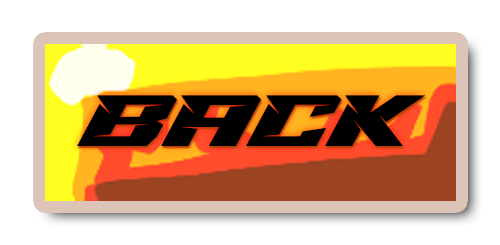
<style>
.page{position:relative;width:500px;height:245px;background:#ffffff}
.page>*{position:absolute;margin:0}
.t1{font:82.7px "BringRace";letter-spacing:0.025em;color:#000000;scale:0.93 1}
</style>
<div class="page">
<p class="t1" style="left:77px;top:95px;width:349px;height:51px">BACK</p>
</div>
